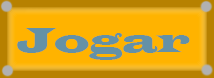
<style>
.page{position:relative;width:214px;height:78px;background:#ffb300}
.page>*{position:absolute;margin:0}
.t1{font:35.6px "LatinWide";color:#6492a7}
</style>
<div class="page">
<p class="t1" style="left:17px;top:28px;width:173px;height:32px">Jogar</p>
</div>
